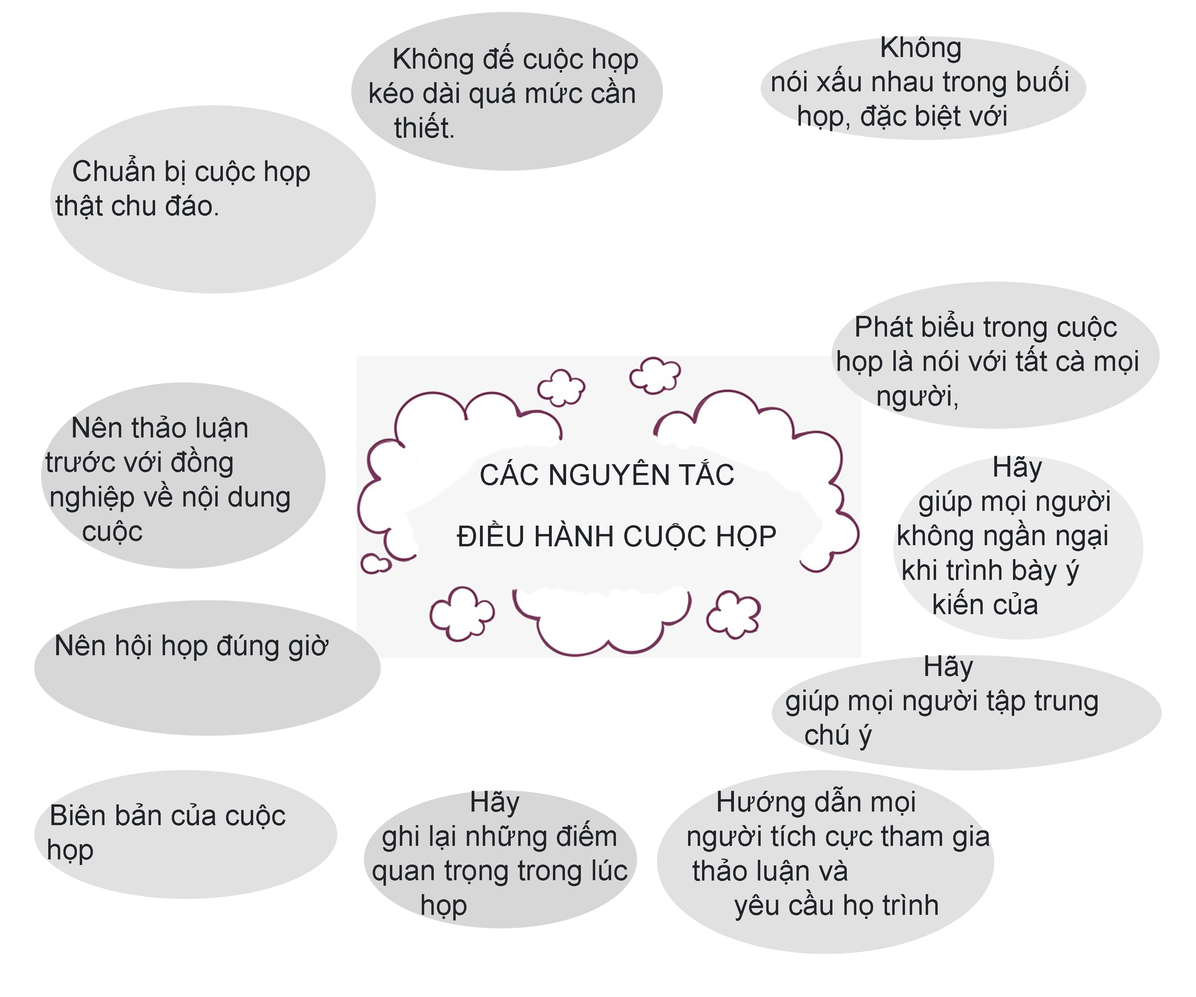
<style>
.page{position:relative;width:1196px;height:997px;background:#ffffff}
.page>*{position:absolute;margin:0}
.t1{font:28.7px "ArialMT";color:#22252a}
</style>
<div class="page">
<p class="t1" style="left:772px;top:36px;width:296px;height:95px">Không nói xấu nhau trong buối họp, đặc biệt với<br>nhũng người vắng mặt</p>
<p class="t1" style="left:370px;top:43px;width:268px;height:95px">Không đế cuộc họp kéo dài quá mức cần thiết.</p>
<p class="t1" style="left:55px;top:155px;width:255px;height:64px">Chuẩn bị cuộc họp thật chu đáo.</p>
<p class="t1" style="left:838px;top:311px;width:300px;height:100px">Phát biểu trong cuộc họp là nói với tất cà mọi người,<br>chứ không phải chỉ riêng với một người</p>
<p class="t1" style="left:45px;top:415px;width:244px;height:130px">Nên thảo luận trước với đồng nghiệp về nội dung cuộc<br>họp.</p>
<p class="t1" style="left:481px;top:459px;width:253px;height:26px">CÁC NGUYÊN TẮC</p>
<p class="t1" style="left:898px;top:456px;width:212px;height:158px">Hãy giúp mọi người không ngần ngại khi trình bày ý<br>kiến của mình</p>
<p class="t1" style="left:457px;top:520px;width:319px;height:30px">ĐIỀU HÀNH CUỘC HỌP</p>
<p class="t1" style="left:56px;top:634px;width:273px;height:27px">Nên hội họp đúng giờ</p>
<p class="t1" style="left:786px;top:655px;width:312px;height:95px">Hãy giúp mọi người tập trung chú ý<br>vào cuộc họp</p>
<p class="t1" style="left:373px;top:791px;width:255px;height:129px">Hãy ghi lại những điếm quan trọng trong lúc họp</p>
<p class="t1" style="left:688px;top:786px;width:302px;height:135px">Hướng dẫn mọi người tích cực tham gia thảo luận và<br>yêu cầu họ trình bày ngắn gọn</p>
<p class="t1" style="left:48px;top:803px;width:237px;height:62px">Biên bản của cuộc họp</p>
</div>
